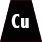
<style>
.page{position:relative;width:42px;height:42px;background:#ffffff}
.page>*{position:absolute;margin:0}
.t1{font:20px "AbadiMT-CondensedExtraBold";color:#ffffff}
</style>
<div class="page">
<p class="t1" style="left:11px;top:14px;width:18px;height:14px">Cu</p>
</div>
